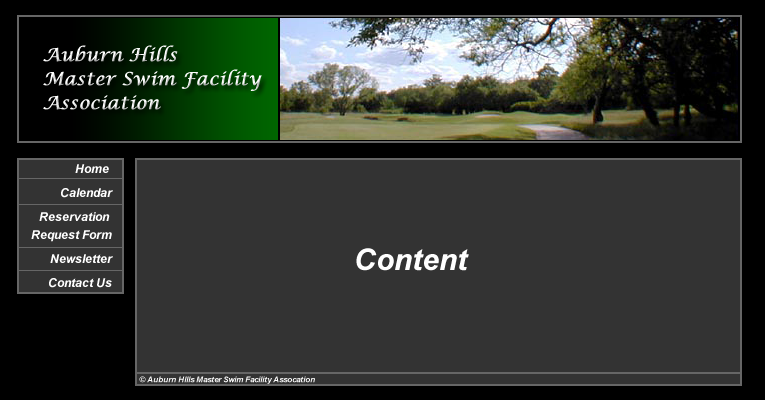
<style>
.page{position:relative;width:765px;height:400px;background:#333333}
.page>*{position:absolute;margin:0}
.t1{font:18px/24px "LucidaCalligraphy-Italic";color:#ececec;font-weight:bold}
.t2{font:12px/24px "Arial-BoldItalicMT";color:#ffffff}
.t3{font:12px/18px "Arial-BoldItalicMT";color:#ffffff}
.t4{font:30px "Arial-BoldItalicMT";color:#ffffff}
.t5{font:8px "Arial-BoldItalicMT";color:#ffffff}
</style>
<div class="page">
<p class="t1" style="left:43px;top:45px;width:219px;height:65px">Auburn Hills<br>Master Swim Facility<br>Association</p>
<p class="t2" style="left:31px;top:164px;width:82px;height:124px;text-align:right">Home <br>Calendar<br>Reservation <br><span class="t3">Request Form<br></span>Newsletter<br>Contact Us</p>
<p class="t4" style="left:356px;top:248px;width:113px;height:23px">Content</p>
<p class="t5" style="left:139px;top:376px;width:176px;height:8px">© Auburn HIlls Master Swim Facility Assocation</p>
</div>
